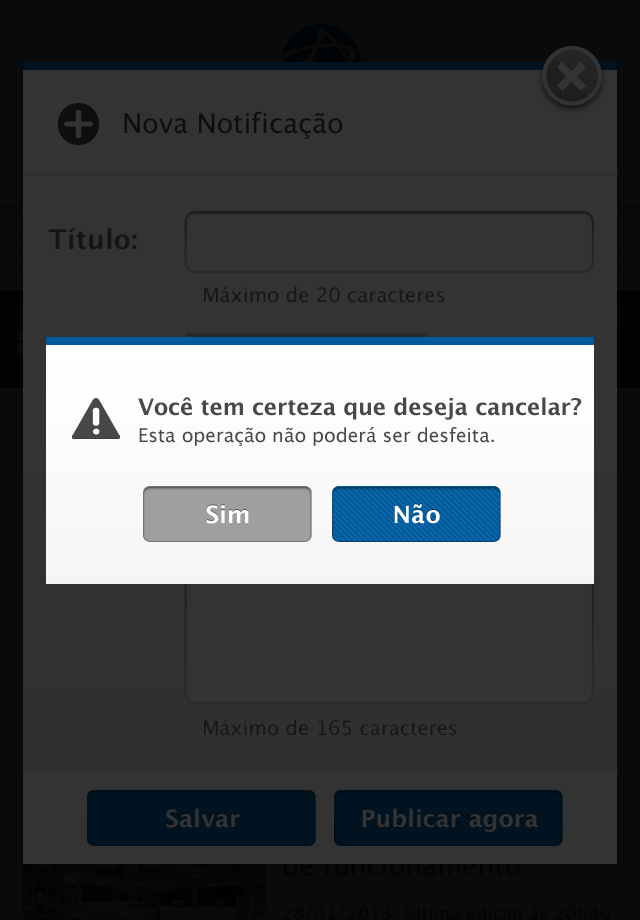
<style>
.page{position:relative;width:640px;height:920px;background:#333333}
.page>*{position:absolute;margin:0}
.t1{font:27.2px "LucidaGrande";color:#0e0e0e}
.t2{font:27.2px "LucidaGrande-Bold";color:#141414}
.t3{font:19.9px "LucidaGrande";color:#181818}
.t4{font:19px/27.2px "LucidaGrande";color:#484848}
.t5{font:22.6px/27.2px "LucidaGrande-Bold";letter-spacing:-0.005em;color:#484848}
.t6{font:24px "LucidaGrande-Bold";color:#ffffff}
.t7{font:24px "LucidaGrande-Bold";color:#333333}
</style>
<div class="page">
<p class="t1" style="left:124px;top:111px;width:219px;height:28px">Nova Notificação</p>
<p class="t2" style="left:48px;top:227px;width:89px;height:23px">Título:</p>
<p class="t3" style="left:204px;top:286px;width:241px;height:17px">Máximo de 20 caracteres</p>
<p class="t4" style="left:138px;top:397px;width:444px;height:49px"><span class="t5">Você tem certeza que deseja cancelar?<br></span>Esta operação não poderá ser desfeita.</p>
<p class="t6" style="left:206px;top:505px;width:43px;height:19px">Sim</p>
<p class="t6" style="left:394px;top:504px;width:46px;height:20px">Não</p>
<p class="t3" style="left:204px;top:719px;width:253px;height:17px">Máximo de 165 caracteres</p>
<p class="t7" style="left:166px;top:808px;width:74px;height:20px">Salvar</p>
<p class="t7" style="left:362px;top:808px;width:176px;height:24px">Publicar agora</p>
</div>
